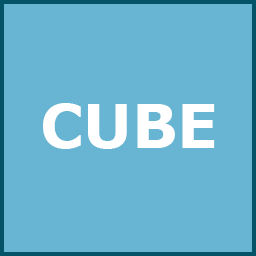
<style>
.page{position:relative;width:256px;height:256px;background:#67b5d2}
.page>*{position:absolute;margin:0}
.t1{font:59.7px "Verdana-Bold";color:#ffffff}
</style>
<div class="page">
<p class="t1" style="left:43px;top:103px;width:172px;height:46px">CUBE</p>
</div>
